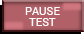
<style>
.page{position:relative;width:84px;height:34px;background:#b16067}
.page>*{position:absolute;margin:0}
.t1{font:11px/11px "Roboto-Regular";color:#ffffff}
</style>
<div class="page">
<p class="t1" style="left:25px;top:7px;width:35px;height:19px;text-align:center">PAUSE<br>TEST</p>
</div>
